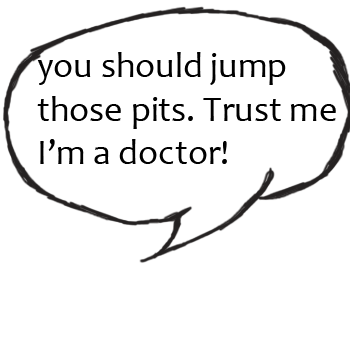
<style>
.page{position:relative;width:350px;height:350px;background:#ffffff}
.page>*{position:absolute;margin:0}
.t1{font:36px "Candara";color:#000000}
</style>
<div class="page">
<p class="t1" style="left:37px;top:52px;width:299px;height:112px">you should jump<br>those pits. Trust me<br>I’m a doctor!</p>
</div>
